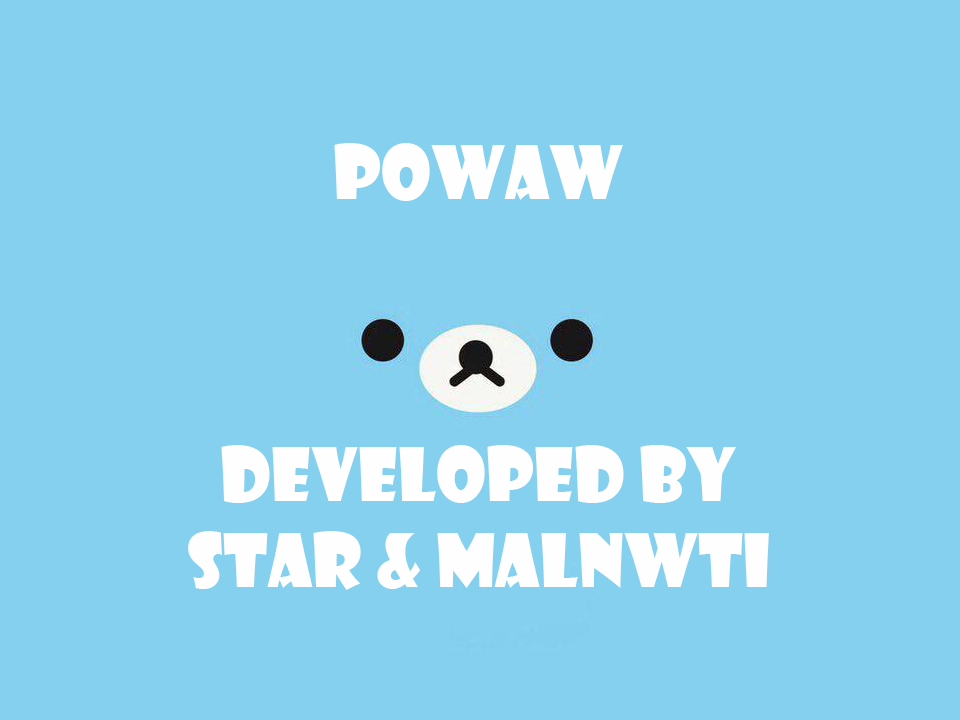
<style>
.page{position:relative;width:960px;height:720px;background:#85d0ef}
.page>*{position:absolute;margin:0}
.t1{font:72px "ShowcardGothic-Reg";color:#fefefe}
</style>
<div class="page">
<p class="t1" style="left:334px;top:143px;width:289px;height:58px">PowAw</p>
<p class="t1" style="left:188px;top:445px;width:581px;height:145px;text-align:center">Developed by <br>Star &amp; MALNWTI</p>
</div>
